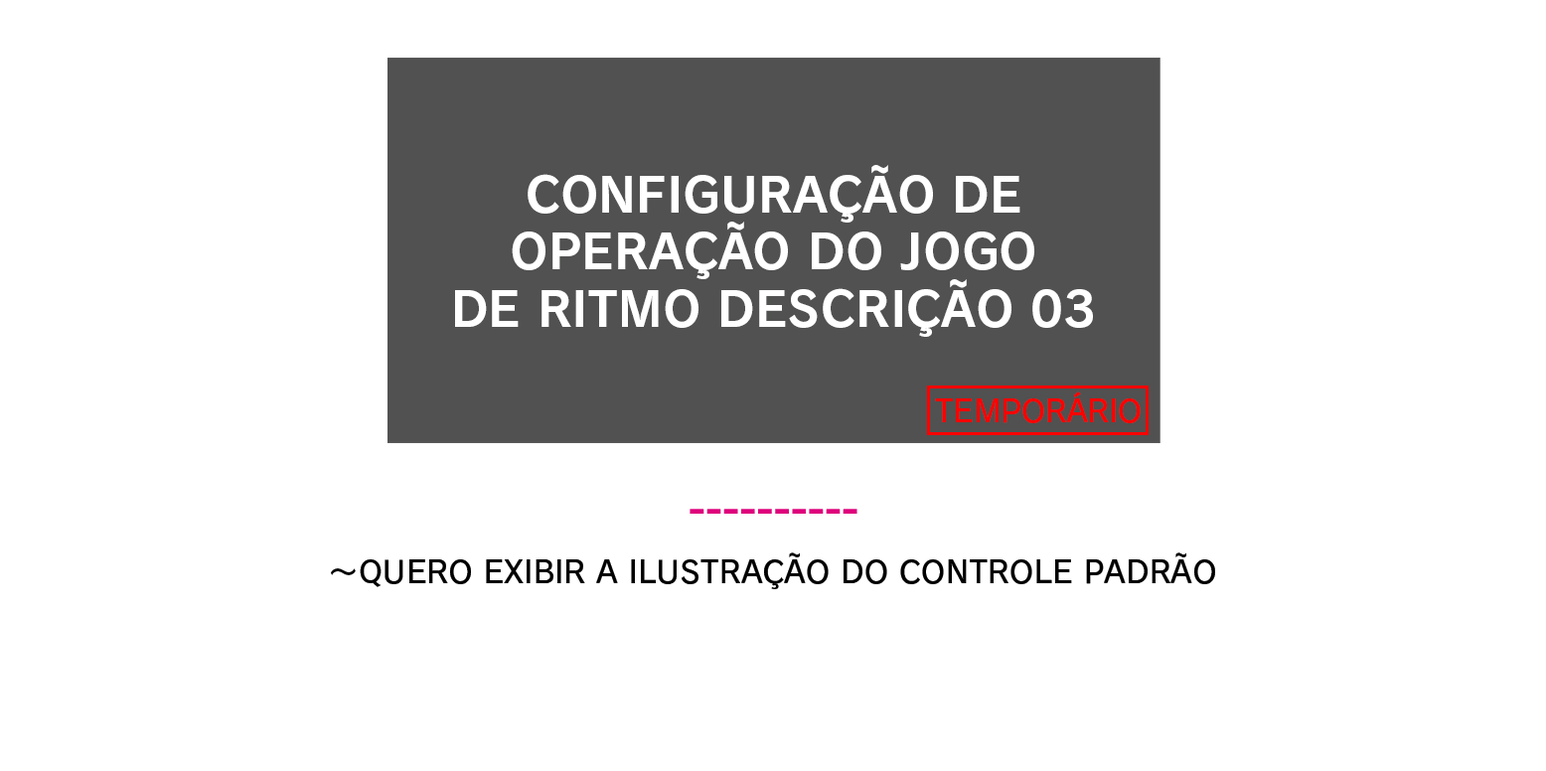
<style>
.page{position:relative;width:1546px;height:771px;background:#ffffff}
.page>*{position:absolute;margin:0}
.t1{font:47.7px "RodinNTLGPro-B";color:#ffffff}
.t2{font:30.5px "RodinProN-DB";letter-spacing:-0.014em;color:#ff0000}
.t3{font:30.5px "RodinNTLGPro-DB";color:#010101}
</style>
<div class="page">
<p class="t1" style="left:455px;top:165px;width:638px;height:172px;text-align:center">CONFIGURAÇÃO DE<br>OPERAÇÃO DO JOGO<br>DE RITMO DESCRIÇÃO 03</p>
<p class="t2" style="left:935px;top:392px;width:206px;height:31px">TEMPORÁRIO</p>
<p class="t3" style="left:331px;top:553px;width:884px;height:36px">～QUERO EXIBIR A ILUSTRAÇÃO DO CONTROLE PADRÃO</p>
</div>
